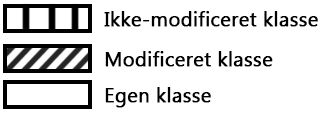
<style>
.page{position:relative;width:324px;height:114px;background:#ffffff}
.page>*{position:absolute;margin:0}
.t1{font:20px "MicrosoftTaiLe";color:#000000;font-weight:bold}
</style>
<div class="page">
<p class="t1" style="left:104px;top:11px;width:214px;height:16px">Ikke-modificeret klasse</p>
<p class="t1" style="left:105px;top:51px;width:168px;height:16px">Modificeret klasse</p>
<p class="t1" style="left:105px;top:87px;width:106px;height:21px">Egen klasse</p>
</div>
